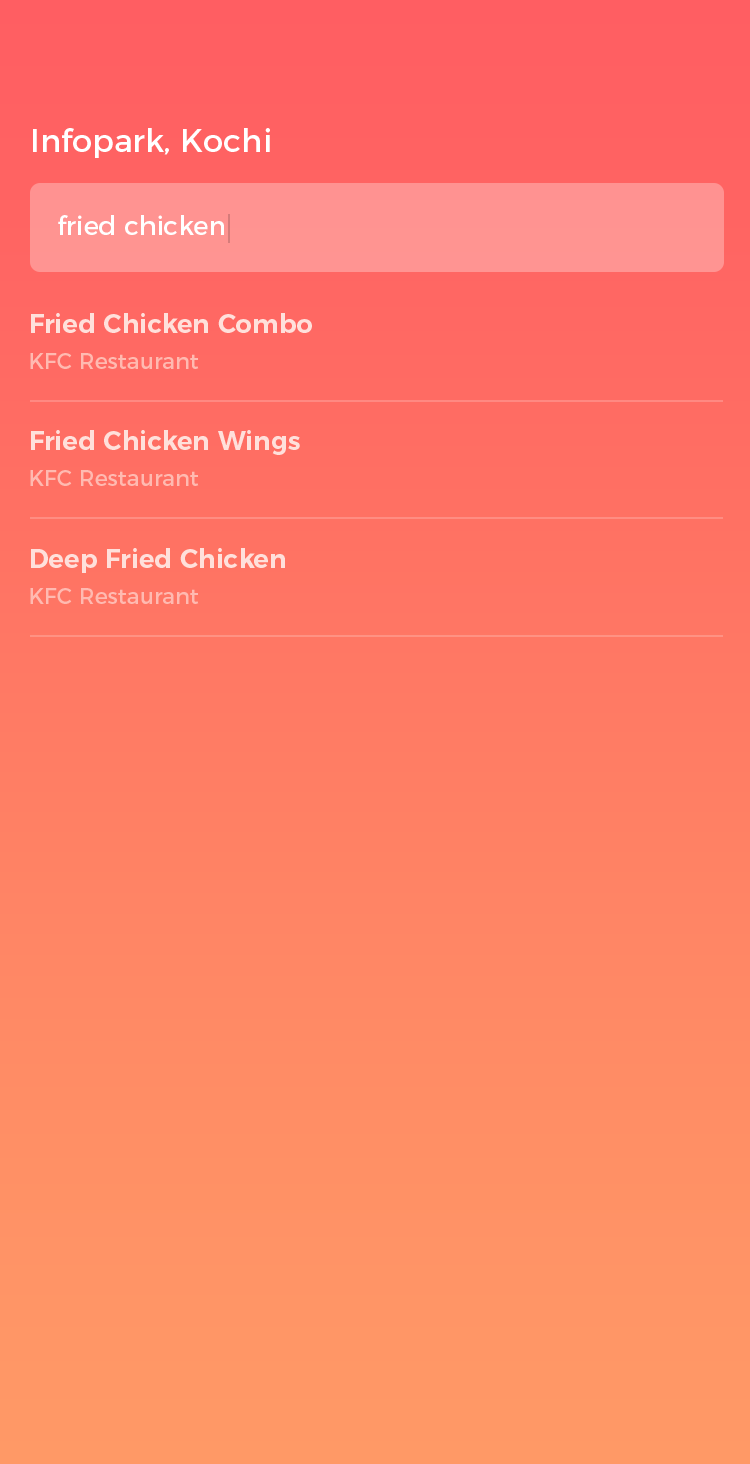
<style>
.page{position:relative;width:750px;height:1464px}
.page>*{position:absolute;margin:0}
.t1{font:32px "Montserrat-Regular";color:#ffffff}
.t2{font:26px "Montserrat-Regular";color:#ffffff}
.t3{font:26px/36px "Montserrat-SemiBold";color:#ffe0db}
.t4{font:22px/36px "Montserrat-Regular";color:#ffbab1}
</style>
<div class="page">
<p class="t1" style="left:33px;top:128px;width:237px;height:30px">Infopark, Kochi</p>
<p class="t2" style="left:58px;top:215px;width:166px;height:20px">fried chicken</p>
<p class="t3" style="left:30px;top:313px;width:282px;height:56px">Fried Chicken Combo<br><span class="t4">KFC Restaurant</span></p>
<p class="t3" style="left:30px;top:430px;width:270px;height:56px">Fried Chicken Wings<br><span class="t4">KFC Restaurant</span></p>
<p class="t3" style="left:30px;top:548px;width:255px;height:56px">Deep Fried Chicken<br><span class="t4">KFC Restaurant</span></p>
</div>
